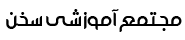
<style>
.page{position:relative;width:185px;height:40px;background:#ffffff}
.page>*{position:absolute;margin:0}
.t1{font:36px "Mj_MoharramBold";color:#000000}
</style>
<div class="page">
<p class="t1" style="left:6px;top:9px;width:176px;height:23px">مجتمع آموزشي سخن</p>
</div>
